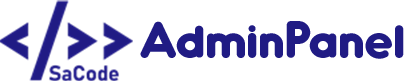
<style>
.page{position:relative;width:404px;height:83px;background:#ffffff}
.page>*{position:absolute;margin:0}
.t1{font:49.3px "Oduda-Bold";letter-spacing:-0.01em;color:#201b84;scale:1.06 1}
</style>
<div class="page">
<p class="t1" style="left:140px;top:21px;width:264px;height:38px">AdminPanel</p>
</div>
